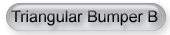
<style>
.page{position:relative;width:170px;height:35px}
.page>*{position:absolute;margin:0}
.t1{font:16px "ArialMT";color:#000000}
</style>
<div class="page">
<p class="t1" style="left:11px;top:10px;width:147px;height:16px">Triangular Bumper B</p>
</div>
